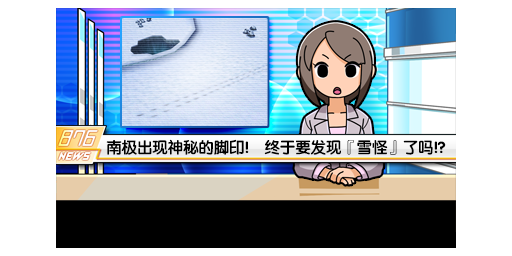
<style>
.page{position:relative;width:512px;height:256px;background:#ffffff}
.page>*{position:absolute;margin:0}
.t1{font:16px "FZY4K--GBK1-0";letter-spacing:-0.04em;color:#000000}
</style>
<div class="page">
<p class="t1" style="left:106px;top:139px;width:340px;height:16px">南极出现神秘的脚印!　终于要发现『雪怪』了吗!?</p>
</div>
